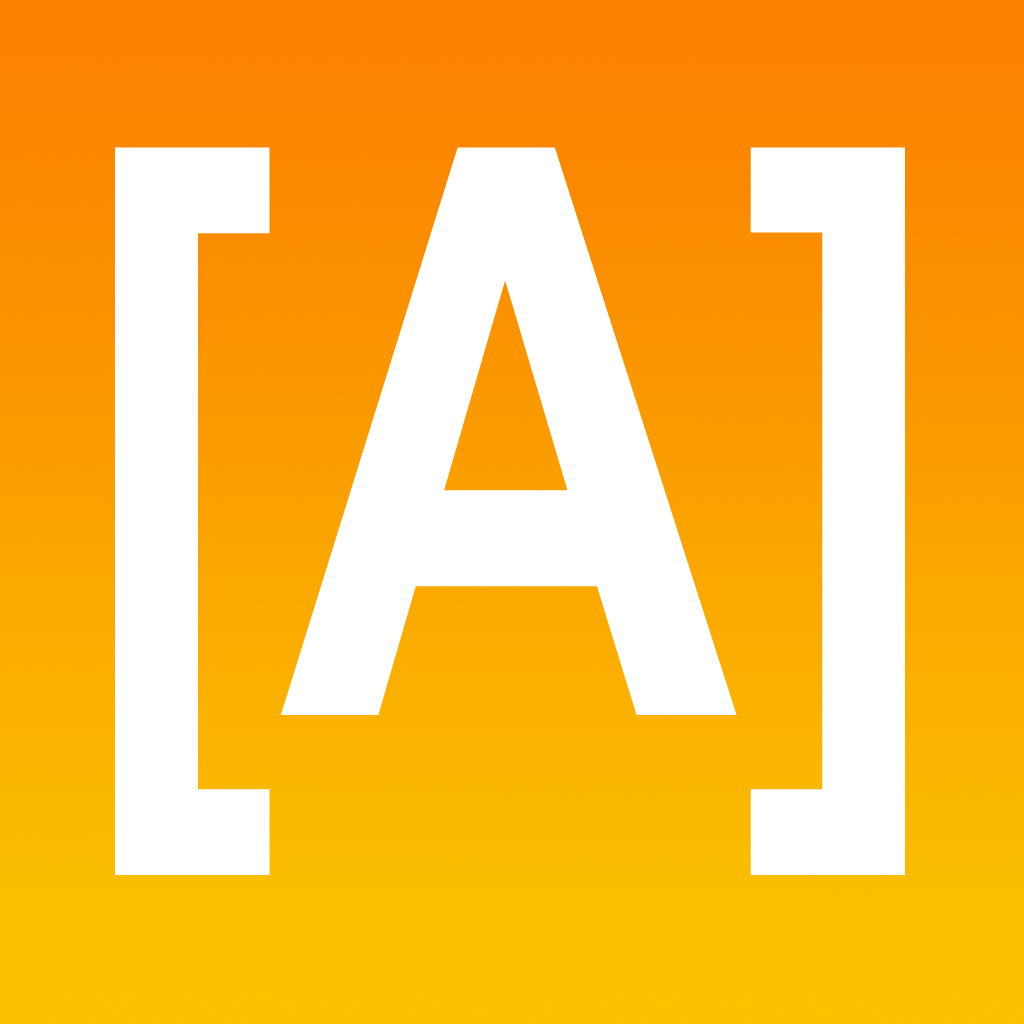
<style>
.page{position:relative;width:1024px;height:1024px;background:#ffffff}
.page>*{position:absolute;margin:0}
.t1{font:792.8px "Arial-BoldMT";color:#ffffff;scale:0.8 1}
</style>
<div class="page">
<p class="t1" style="left:115px;top:147px;width:790px;height:728px">[A]</p>
</div>
